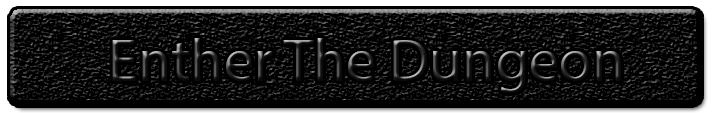
<style>
.page{position:relative;width:713px;height:113px;background:#000000}
.page>*{position:absolute;margin:0}
.t1{font:60px "MyriadPro-Regular"}
</style>
<div class="page">
<p class="t1" style="left:112px;top:38px;width:509px;height:55px">Enther The Dungeon</p>
</div>
